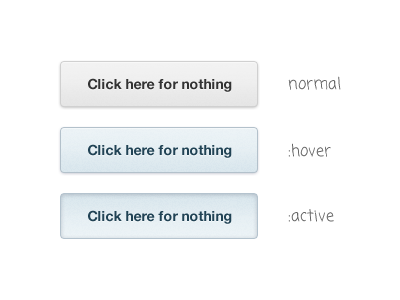
<style>
.page{position:relative;width:400px;height:300px;background:#ffffff}
.page>*{position:absolute;margin:0}
.t1{font:14px "HelveticaNeue-Bold";color:#333333}
.t2{font:16px "ComingSoon";color:#666666}
.t3{font:14px "HelveticaNeue-Bold";color:#214355}
</style>
<div class="page">
<p class="t1" style="left:88px;top:78px;width:144px;height:14px">Click here for nothing</p>
<p class="t2" style="left:288px;top:76px;width:53px;height:14px">normal</p>
<p class="t3" style="left:88px;top:144px;width:144px;height:14px">Click here for nothing</p>
<p class="t2" style="left:288px;top:143px;width:43px;height:14px">:hover</p>
<p class="t2" style="left:288px;top:209px;width:46px;height:13px">:active</p>
<p class="t3" style="left:88px;top:210px;width:144px;height:14px">Click here for nothing</p>
</div>
